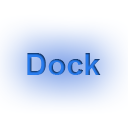
<style>
.page{position:relative;width:128px;height:128px;background:#ffffff}
.page>*{position:absolute;margin:0}
.t1{font:31px "Arial-BoldMT"}
</style>
<div class="page">
<p class="t1" style="left:27px;top:53px;width:74px;height:22px">Dock</p>
</div>
